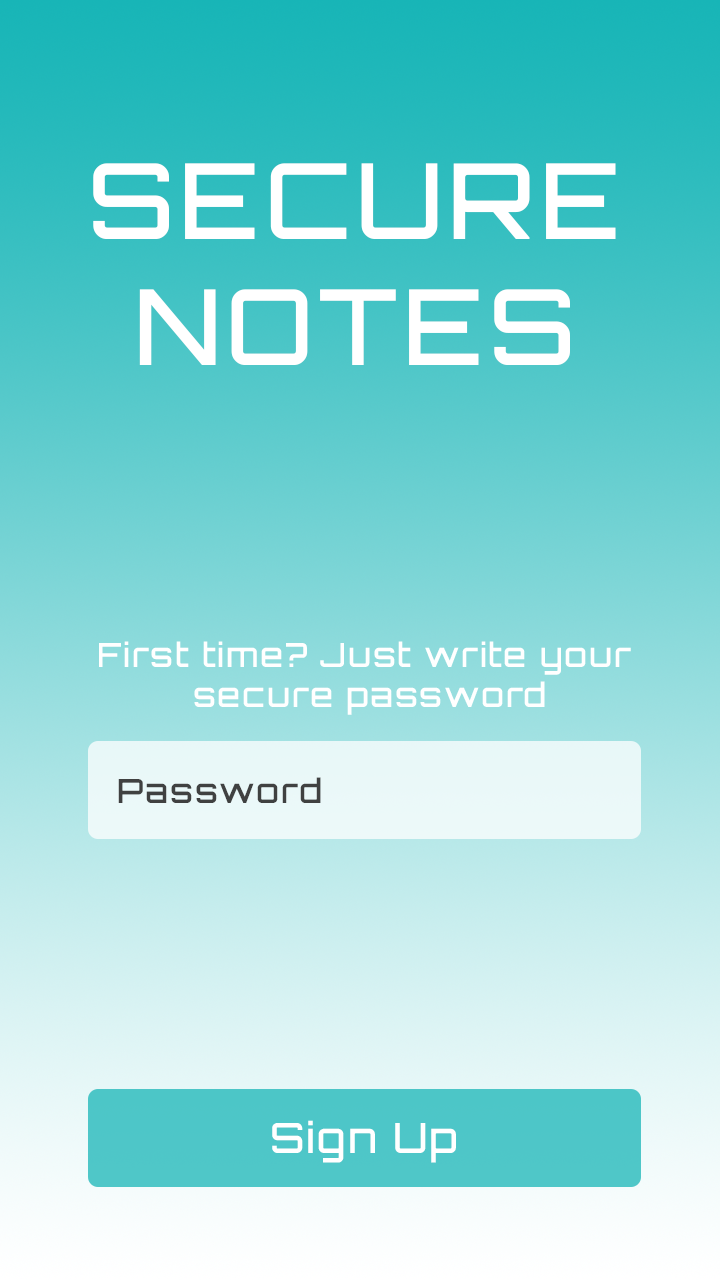
<style>
.page{position:relative;width:720px;height:1280px}
.page>*{position:absolute;margin:0}
.t1{font:104.8px "Orbitron-Medium";letter-spacing:0.05em;color:#ffffff}
.t2{font:33.3px "Orbitron-Medium";letter-spacing:0.05em;color:#ffffff}
.t3{font:33.3px "Orbitron-Medium";letter-spacing:0.05em;color:#303030}
.t4{font:41.7px "Orbitron-Medium";letter-spacing:0.05em;color:#ffffff}
</style>
<div class="page">
<p class="t1" style="left:93px;top:163px;width:523px;height:202px;text-align:center">SECURE<br>NOTES</p>
<p class="t2" style="left:99px;top:641px;width:532px;height:74px;text-align:center">First time? Just write your<br> secure password</p>
<p class="t3" style="left:118px;top:777px;width:203px;height:26px;opacity:0.95">Password</p>
<p class="t4" style="left:272px;top:1120px;width:184px;height:43px">Sign Up</p>
</div>
